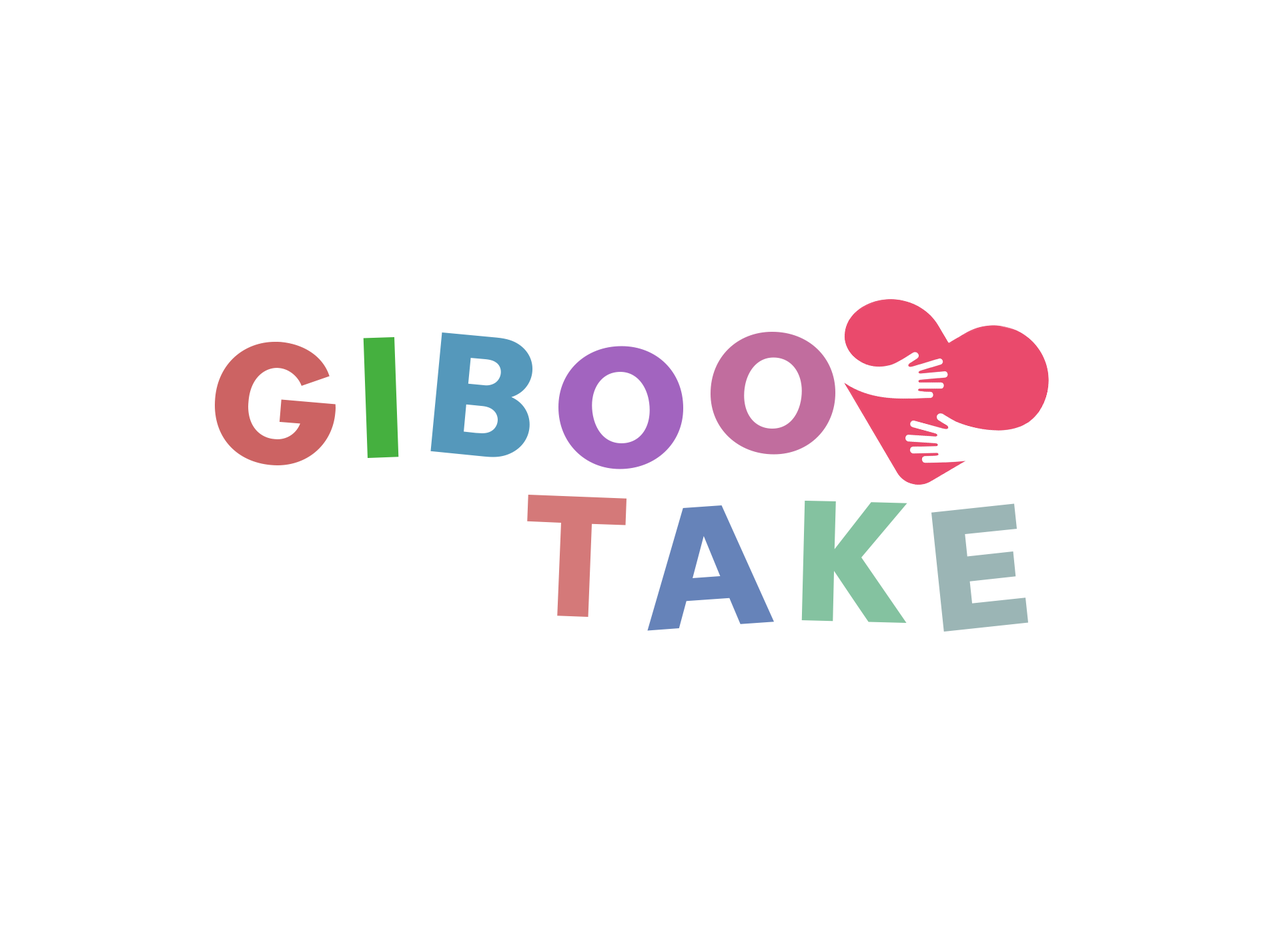
<style>
.page{position:relative;width:1261px;height:946px;background:#ffffff}
.page>*{position:absolute;margin:0}
.t1{font:166.8px "GambadoSansForte";letter-spacing:0.1em;color:#cc6363}
.t2{font:166.8px "GambadoSansForte";letter-spacing:0.1em;color:#45b03f}
.t3{font:166.8px "GambadoSansForte";letter-spacing:0.1em;color:#5598bb}
.t4{font:166.8px "GambadoSansForte";letter-spacing:0.1em;color:#a264bf}
.t5{font:166.8px "GambadoSansForte";letter-spacing:0.1em;color:#c16d9e}
.t6{font:166.8px "GambadoSansForte";letter-spacing:0.1em;color:#d47979}
.t7{font:166.8px "GambadoSansForte";letter-spacing:0.1em;color:#6683b9}
.t8{font:166.8px "GambadoSansForte";letter-spacing:0.1em;color:#84c2a0}
.t9{font:166.8px "GambadoSansForte";letter-spacing:0.1em;color:#9bb5b5}
</style>
<div class="page">
<p class="t1" style="left:215px;top:332px;width:620px;height:137px">G<span class="t2">I</span><span class="t3">B</span><span class="t4">O</span><span class="t5">O</span></p>
<p class="t6" style="left:527px;top:494px;width:501px;height:138px">T<span class="t7">A</span><span class="t8">K</span><span class="t9">E</span></p>
</div>
